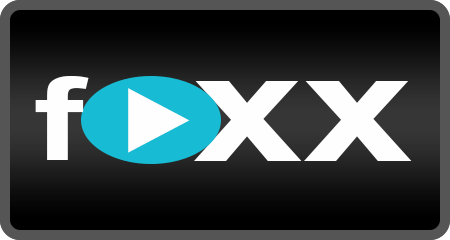
<style>
.page{position:relative;width:450px;height:240px}
.page>*{position:absolute;margin:0}
.t1{font:115.3px "Arial-BoldMT";color:#fefefe;scale:1.3 1}
.t2{font:152.7px "Arial-BoldMT";color:#fefefe;scale:1.3 1}
</style>
<div class="page">
<p class="t1" style="left:35px;top:76px;width:54px;height:84px">f</p>
<p class="t2" style="left:194px;top:81px;width:218px;height:80px">xx</p>
</div>
